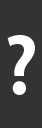
<style>
.page{position:relative;width:42px;height:128px;background:#333333}
.page>*{position:absolute;margin:0}
.t1{font:75px "AdobeGothicStd-Bold";color:#ffffff}
</style>
<div class="page">
<p class="t1" style="left:7px;top:35px;width:28px;height:60px">?</p>
</div>
